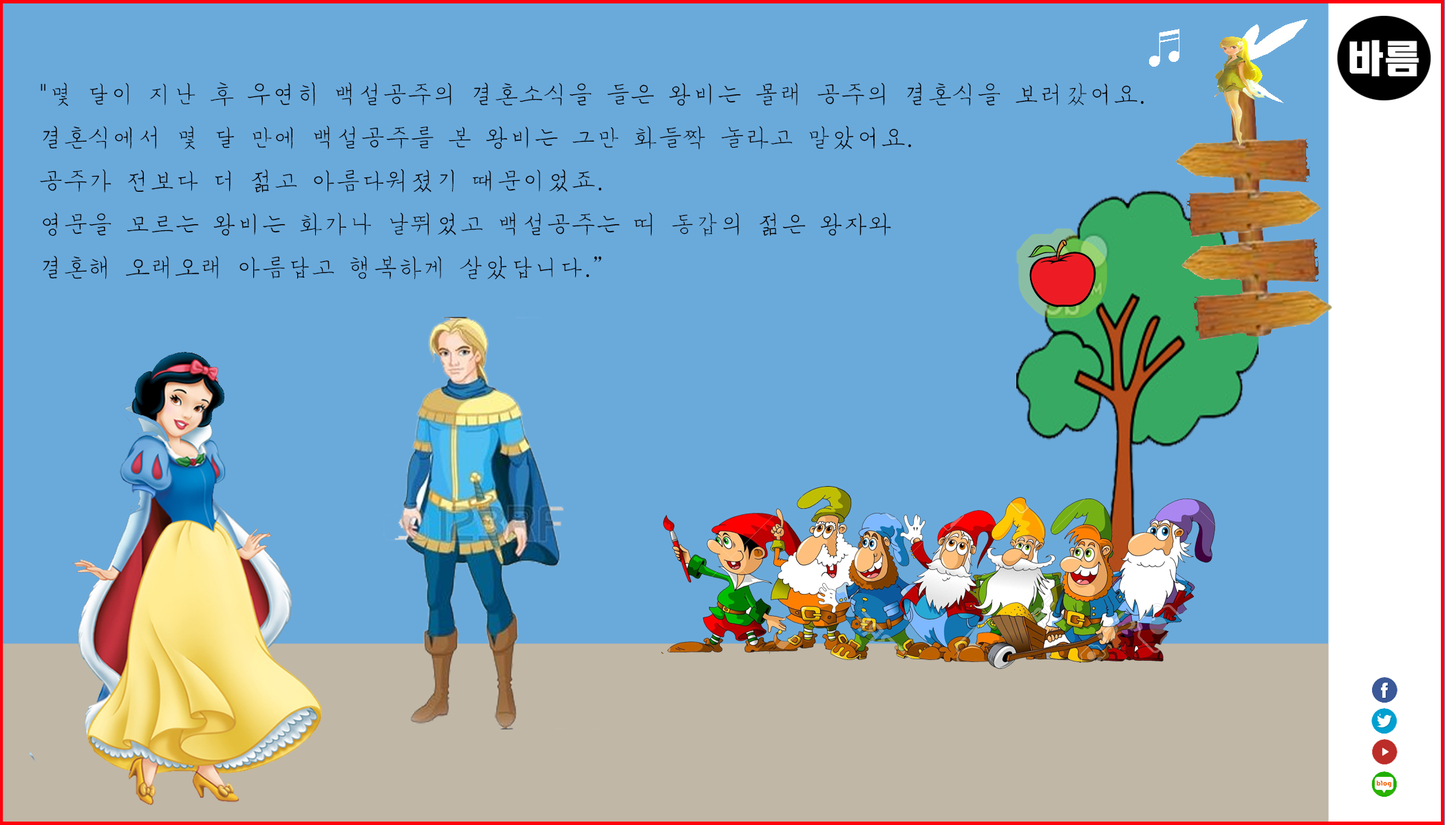
<style>
.page{position:relative;width:1445px;height:825px;background:#6aaadb}
.page>*{position:absolute;margin:0}
.t1{font:24.8px "MSugiJeong";color:#050101}
.t2{font:24.8px "Gulim";color:#050101}
</style>
<div class="page">
<p class="t1" style="left:40px;top:82px;width:1103px;height:198px"><span class="t2">"</span>몇 달이 지난 후 우연히 백설공주의 결혼소식을 들은 왕비는 몰래 공주의 결혼식을 보러갔어요<span class="t2">.</span> <br>결혼식에서 몇 달 만에 백설공주를 본 왕비는 그만 화들짝 놀라고 말았어요<span class="t2">.</span> <br>공주가 전보다 더 젊고 아름다워졌기 때문이었죠<span class="t2">.</span> <br>영문을 모르는 왕비는 화가나 날뛰었고 백설공주는 띠 동갑의 젊은 왕자와 <br>결혼해 오래오래 아름답고 행복하게 살았답니다<span class="t2">.”</span></p>
</div>
